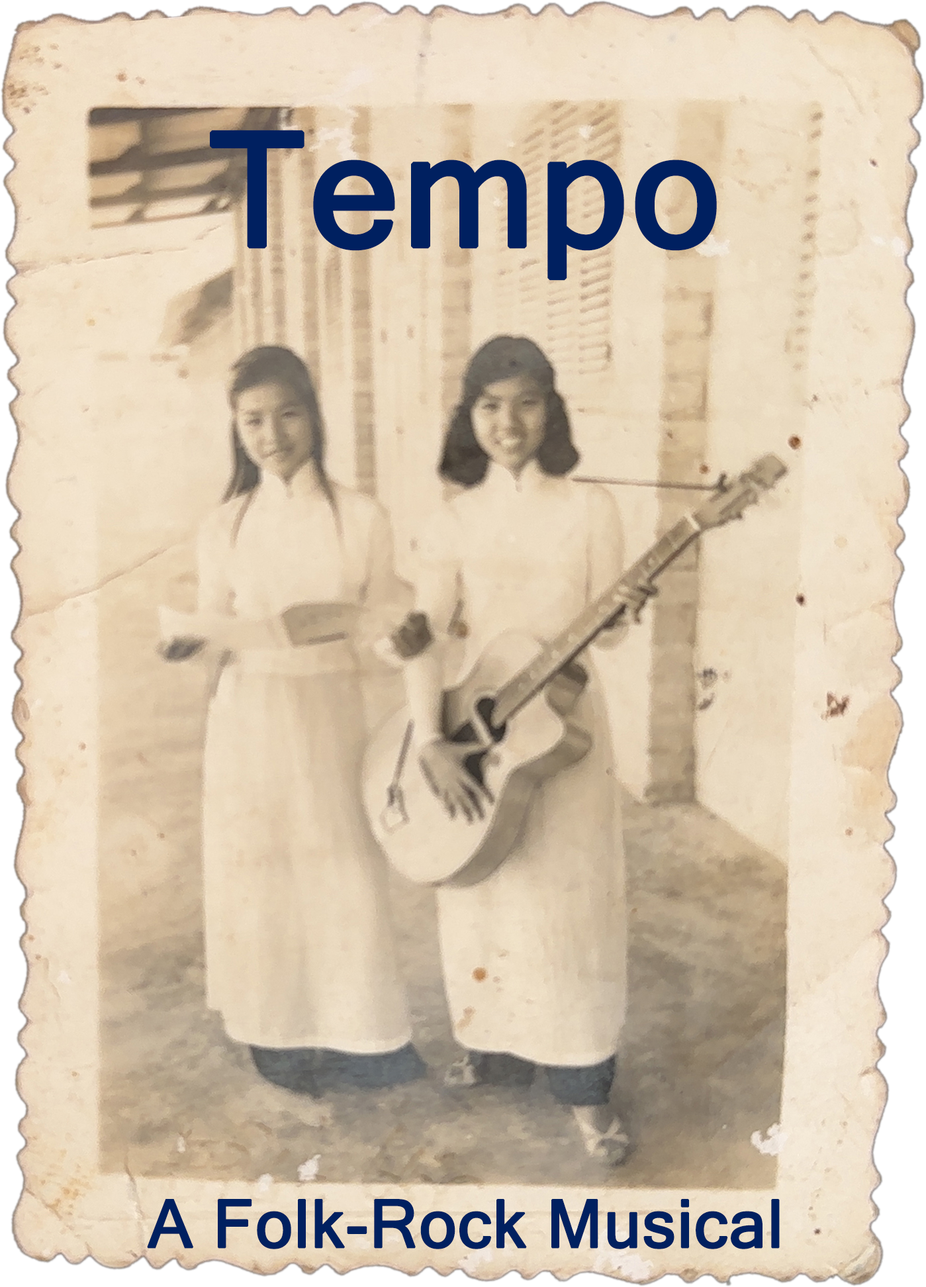
<style>
.page{position:relative;width:926px;height:1287px}
.page>*{position:absolute;margin:0}
.t1{font:66.2px "MicrosoftSansSerif";color:#002060;font-weight:bold}
.t2{font:158.9px "MicrosoftSansSerif";color:#002060;font-weight:bold}
</style>
<div class="page">
<p class="t1" style="left:147px;top:130px;width:633px;height:1119px;text-align:center"><span class="t2">Tempo<br><br><br><br><br></span><br><br>A Folk-Rock Musical</p>
</div>
